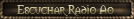
<style>
.page{position:relative;width:134px;height:19px}
.page>*{position:absolute;margin:0}
.t1{font:12px "Morpheus"}
</style>
<div class="page">
<p class="t1" style="left:17px;top:5px;width:97px;height:11px">Escuchar Radio Ao</p>
</div>
